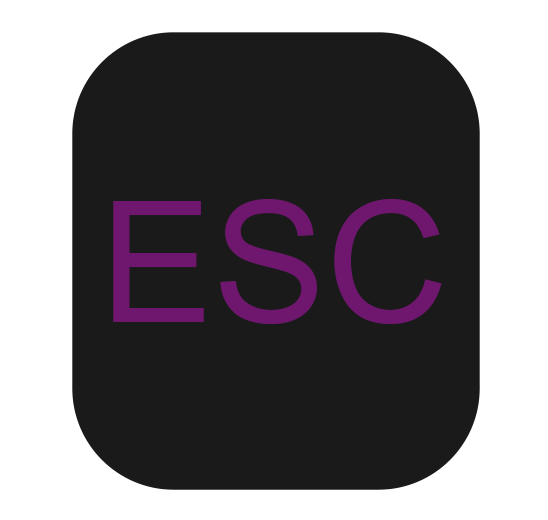
<style>
.page{position:relative;width:548px;height:520px;background:#1a1a1a}
.page>*{position:absolute;margin:0}
.t1{font:169.1px "ArialMT";color:#6f176e}
</style>
<div class="page">
<p class="t1" style="left:113px;top:199px;width:329px;height:125px">ESC</p>
</div>
